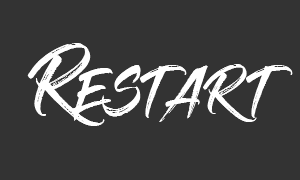
<style>
.page{position:relative;width:300px;height:180px;background:#333333}
.page>*{position:absolute;margin:0}
.t1{font:66px "GlossAndBloom";color:#ffffff;font-variant:small-caps}
</style>
<div class="page">
<p class="t1" style="left:27px;top:43px;width:266px;height:83px">Restart</p>
</div>
